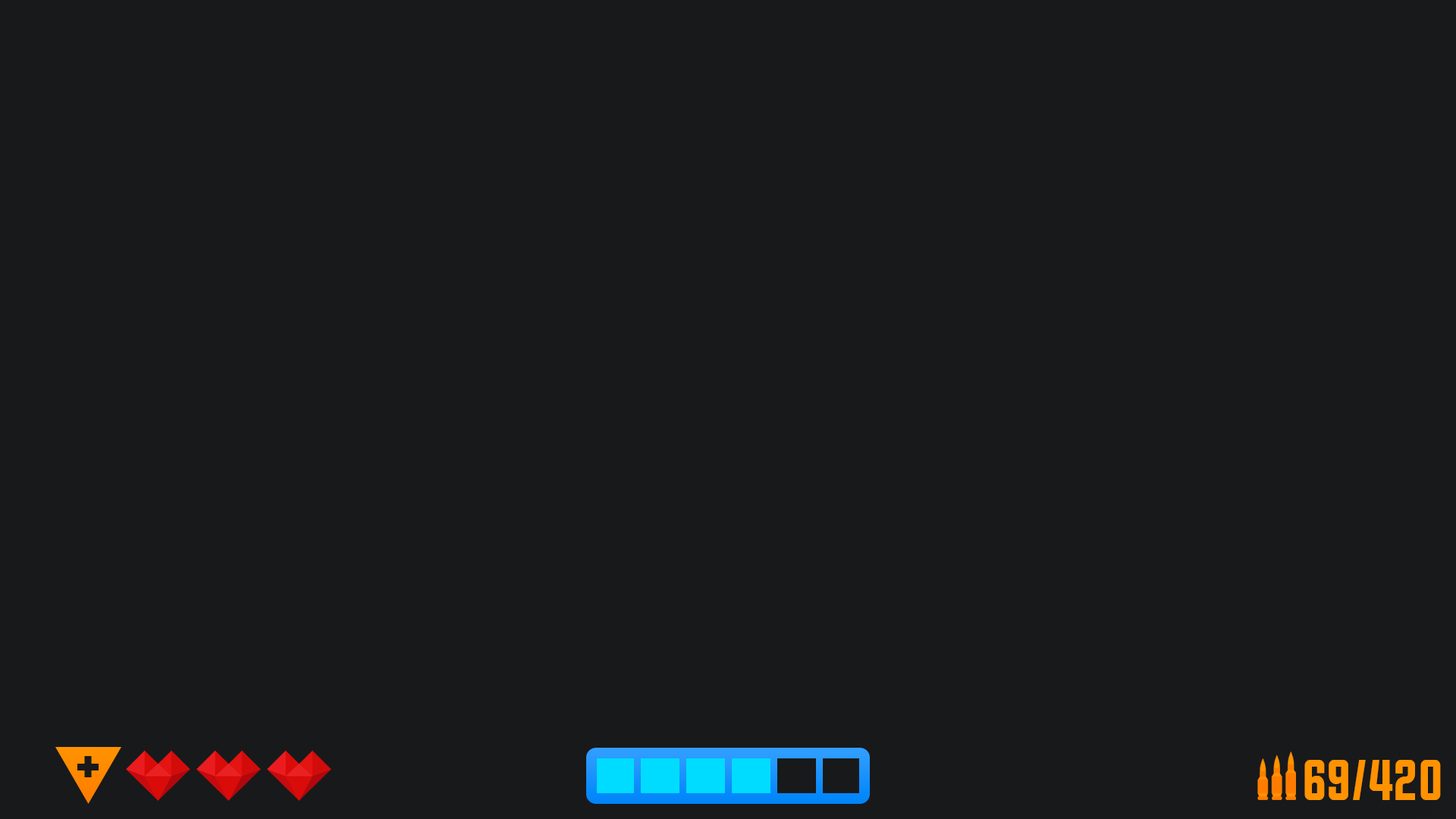
<style>
.page{position:relative;width:1456px;height:819px;background:#18191b}
.page>*{position:absolute;margin:0}
.t1{font:47.4px "Evogria";letter-spacing:-0.06em;color:#ff9200;text-transform:uppercase;scale:0.91 1}
</style>
<div class="page">
<p class="t1" style="left:1304px;top:760px;width:137px;height:40px">69/420</p>
</div>
